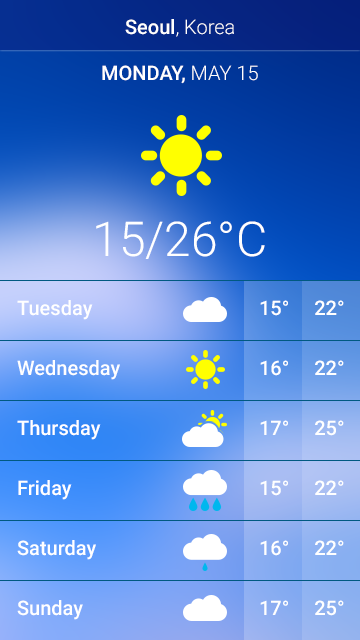
<style>
.page{position:relative;width:360px;height:640px}
.page>*{position:absolute;margin:0}
.t1{font:20px "Roboto-Light";color:#ffffff}
.t2{font:20px "Roboto-Medium";color:#ffffff}
.t3{font:48px "Roboto-Light";color:#ffffff}
.t4{font:20px/60px "Roboto-Medium";color:#ffffff}
</style>
<div class="page">
<p class="t1" style="left:125px;top:19px;width:109px;height:18px"><span class="t2">Seoul</span>, Korea</p>
<p class="t2" style="left:102px;top:65px;width:156px;height:19px">MONDAY, <span class="t1">MAY 15</span></p>
<p class="t3" style="left:96px;top:221px;width:169px;height:38px">15/26°C</p>
<p class="t4" style="left:17px;top:300px;width:103px;height:320px">Tuesday<br>Wednesday<br>Thursday<br>Friday<br>Saturday<br>Sunday</p>
<p class="t4" style="left:260px;top:300px;width:84px;height:316px">15°     22°<br>16°     22°<br>17°     25°<br>15°     22°<br>16°     22°<br>17°     25°</p>
</div>
